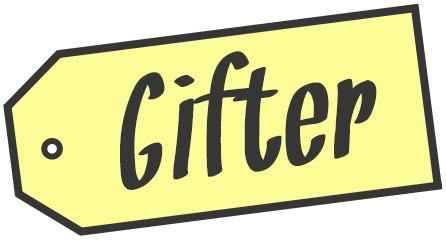
<style>
.page{position:relative;width:446px;height:240px;background:#fcfc96}
.page>*{position:absolute;margin:0}
.t1{font:159.8px "Snickles";letter-spacing:0.04em;color:#363636;scale:0.9 1}
</style>
<div class="page">
<p class="t1" style="left:120px;top:51px;width:257px;height:139px;rotate:-7deg">Gifter</p>
</div>
